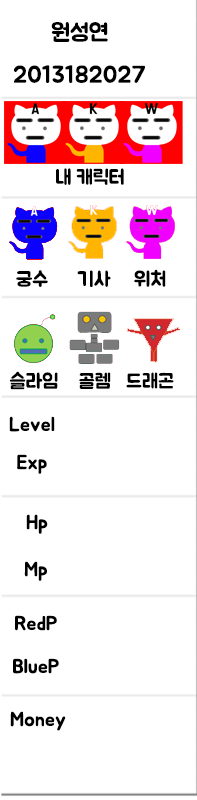
<style>
.page{position:relative;width:197px;height:800px;background:#ffffff}
.page>*{position:absolute;margin:0}
.t1{font:24px "BMJUA";color:#000000}
.t2{font:20px "BMJUA";color:#000000}
</style>
<div class="page">
<p class="t1" style="left:14px;top:22px;width:131px;height:61px;text-align:center">원성연<br>2013182027</p>
<p class="t2" style="left:56px;top:168px;width:68px;height:17px">내 캐릭터</p>
<p class="t2" style="left:16px;top:270px;width:32px;height:17px">궁수</p>
<p class="t2" style="left:77px;top:270px;width:34px;height:17px">기사</p>
<p class="t2" style="left:134px;top:269px;width:32px;height:18px">위처</p>
<p class="t2" style="left:9px;top:371px;width:49px;height:19px">슬라임</p>
<p class="t2" style="left:79px;top:372px;width:32px;height:17px">골렘</p>
<p class="t2" style="left:126px;top:372px;width:48px;height:17px">드래곤</p>
<p class="t2" style="left:9px;top:416px;width:46px;height:16px">Level</p>
<p class="t2" style="left:17px;top:454px;width:30px;height:20px">Exp</p>
<p class="t2" style="left:26px;top:514px;width:22px;height:20px">Hp</p>
<p class="t2" style="left:24px;top:561px;width:23px;height:20px">Mp</p>
<p class="t2" style="left:15px;top:615px;width:42px;height:16px">RedP</p>
<p class="t2" style="left:13px;top:658px;width:46px;height:16px">BlueP</p>
<p class="t2" style="left:10px;top:711px;width:56px;height:20px">Money</p>
</div>
